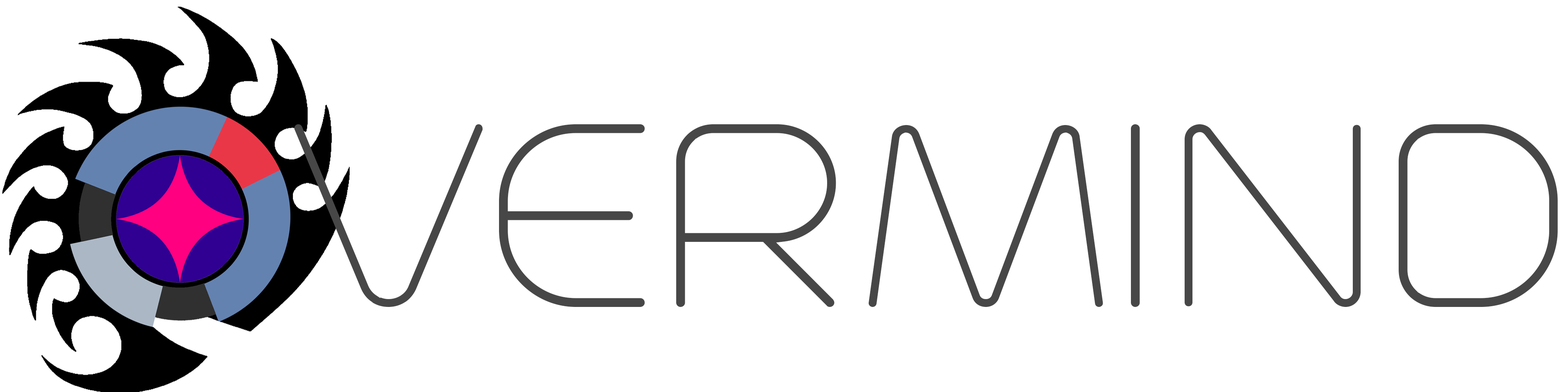
<style>
.page{position:relative;width:1568px;height:392px;background:#ffffff}
.page>*{position:absolute;margin:0}
.t1{font:326.7px "Trench-Thin";color:#474747}
</style>
<div class="page">
<p class="t1" style="left:294px;top:124px;width:1264px;height:183px">VERMIND</p>
</div>
